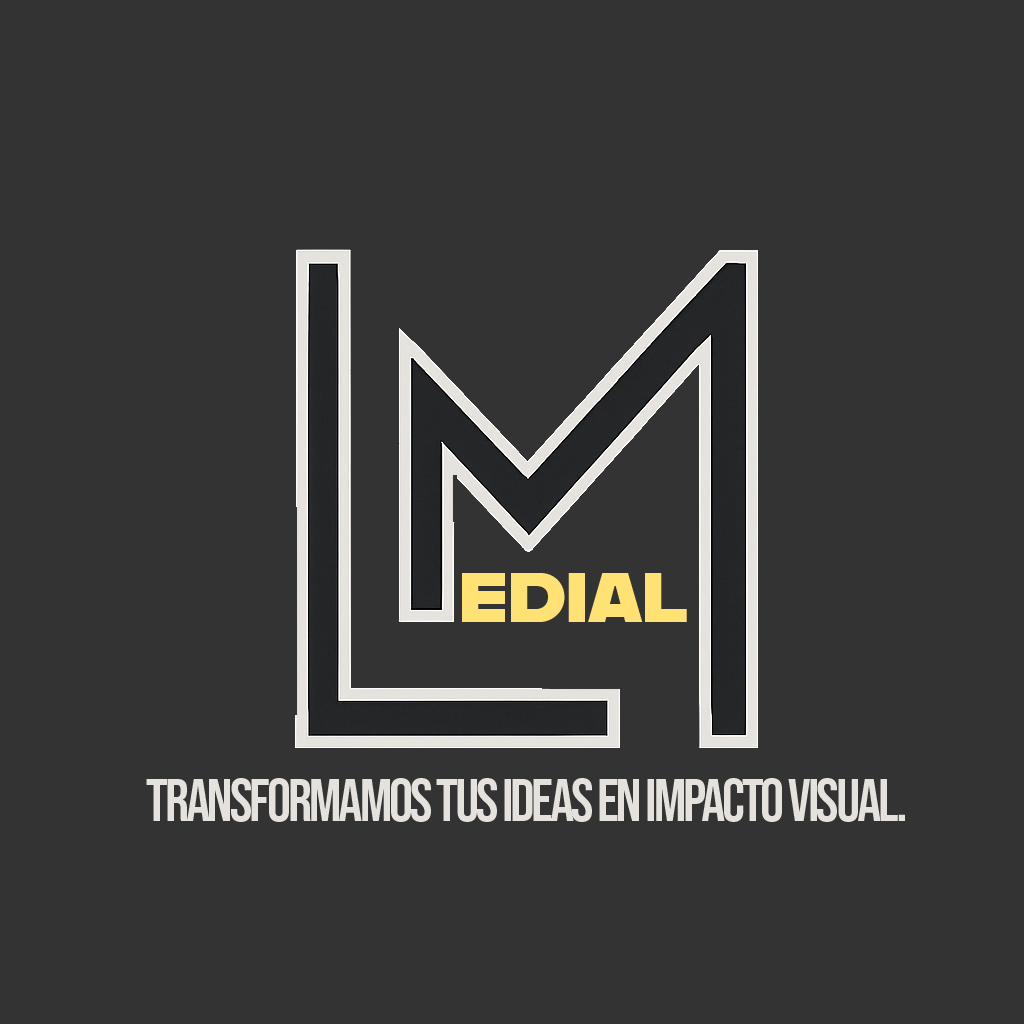
<style>
.page{position:relative;width:1024px;height:1024px;background:#333333}
.page>*{position:absolute;margin:0}
.t1{font:70px "Alfarn";letter-spacing:-0.05em;color:#ffe174}
.t2{font:60px "BebasNeue-Regular";letter-spacing:-0.05em;color:#e5e2de}
</style>
<div class="page">
<p class="t1" style="left:462px;top:573px;width:225px;height:49px">EDIAL</p>
<p class="t2" style="left:146px;top:778px;width:759px;height:44px">Transformamos tus ideas en impacto visual.</p>
</div>
